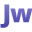
<style>
.page{position:relative;width:32px;height:32px;background:#ffffff}
.page>*{position:absolute;margin:0}
.t1{font:25px "OpenSans-Extrabold";letter-spacing:-0.05em;color:#615cb7}
</style>
<div class="page">
<p class="t1" style="left:0px;top:4px;width:33px;height:24px">Jw</p>
</div>
